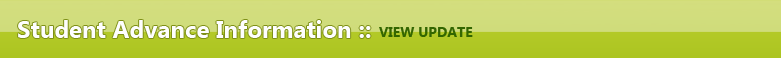
<style>
.page{position:relative;width:781px;height:58px}
.page>*{position:absolute;margin:0}
.t1{font:24px "SegoeUI-Bold";color:#fefefe}
.t2{font:14px "SegoeUI-Bold";color:#336600}
</style>
<div class="page">
<p class="t1" style="left:18px;top:20px;width:353px;height:18px">Student Advance Information ::</p>
<p class="t2" style="left:379px;top:27px;width:94px;height:10px">VIEW UPDATE</p>
</div>
